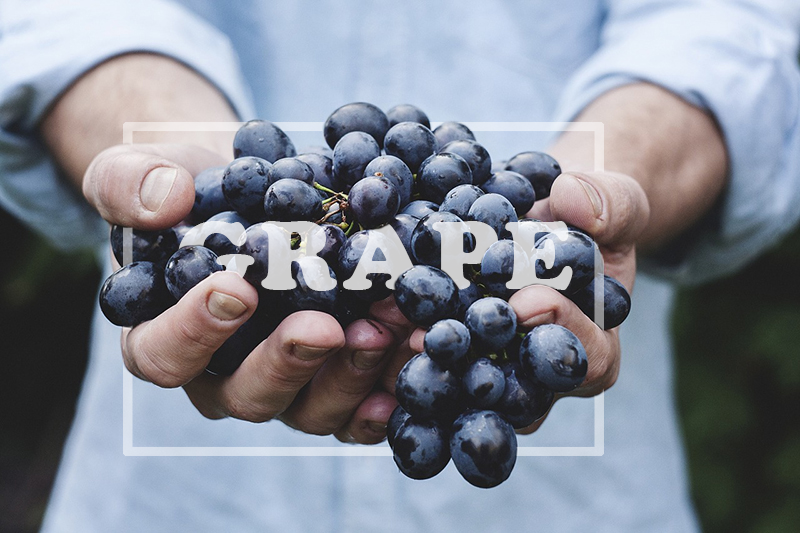
<style>
.page{position:relative;width:800px;height:533px}
.page>*{position:absolute;margin:0}
.t1{font:100px "CooperBlack";letter-spacing:0.05em}
</style>
<div class="page">
<p class="t1" style="left:178px;top:221px;width:395px;height:70px">GRAPE</p>
</div>
